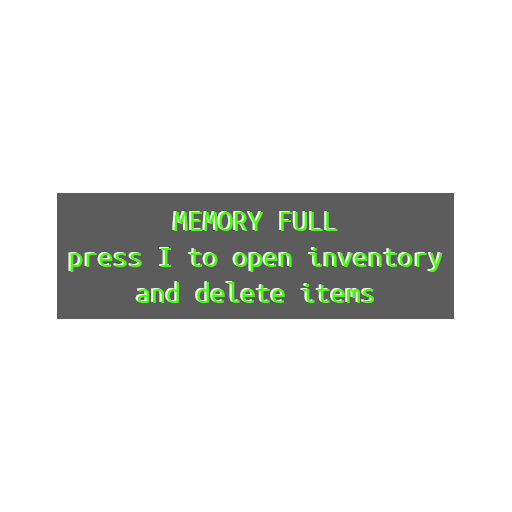
<style>
.page{position:relative;width:512px;height:512px;background:#ffffff}
.page>*{position:absolute;margin:0}
.t1{font:30px "UbuntuMono-Regular"}
.t2{font:30px "UbuntuMono-Regular";color:#42ff00}
</style>
<div class="page">
<p class="t1" style="left:68px;top:211px;width:373px;height:91px;text-align:center">MEMORY FULL<br>press I to open inventory<br>and delete items</p>
<p class="t2" style="left:70px;top:212px;width:373px;height:91px;text-align:center">MEMORY FULL<br>press I to open inventory<br>and delete items</p>
</div>
